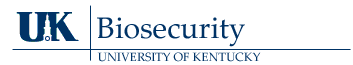
<style>
.page{position:relative;width:353px;height:65px;background:#ffffff}
.page>*{position:absolute;margin:0}
.t1{font:30px "PalatinoLinotype-Roman";color:#003366}
.t2{font:12px "PalatinoLinotype-Roman";color:#003366}
</style>
<div class="page">
<p class="t1" style="left:97px;top:17px;width:148px;height:30px">Biosecurity</p>
<p class="t2" style="left:97px;top:52px;width:164px;height:10px">UNIVERSITY OF KENTUCKY</p>
</div>
